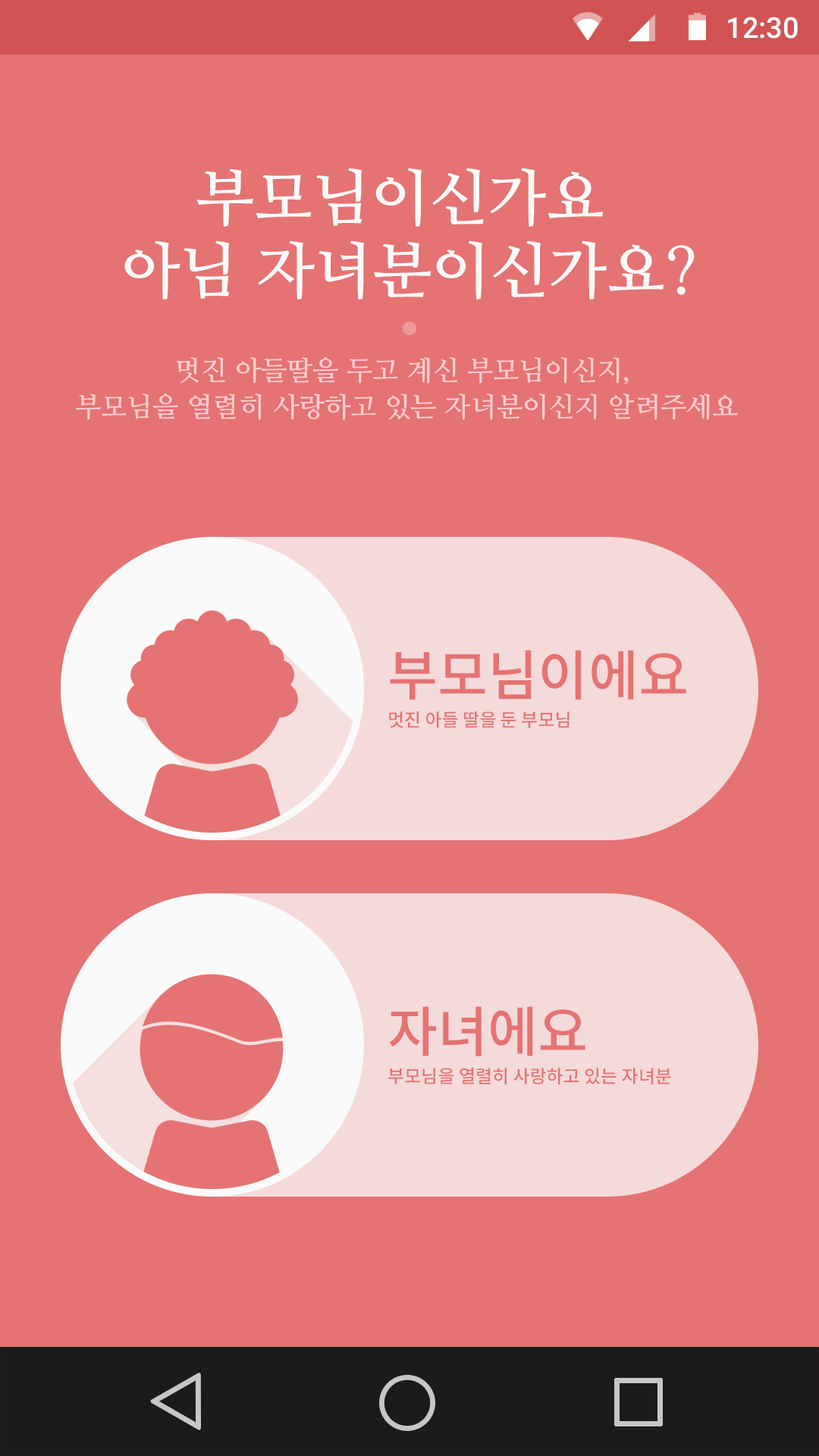
<style>
.page{position:relative;width:819px;height:1456px;background:#e57373}
.page>*{position:absolute;margin:0}
.t1{font:28.8px "Roboto-Medium";color:#ffffff}
.t2{font:61.4px/72.8px "NanumMyeongjoBold";color:#fafafa}
.t3{font:27.3px/36.4px "NanumMyeongjoBold";color:#ffcdd2}
.t4{font:54.6px "NotoSansCJKkr-Medium";color:#e57373}
.t5{font:18.2px "NotoSansCJKkr-Medium";color:#e57373}
</style>
<div class="page">
<p class="t1" style="left:728px;top:17px;width:70px;height:22px">12:30</p>
<p class="t2" style="left:124px;top:168px;width:571px;height:132px;text-align:center">부모님이신가요 <br>아님 자녀분이신가요?</p>
<p class="t3" style="left:75px;top:357px;width:663px;height:63px;text-align:center">멋진 아들딸을 두고 계신 부모님이신지, <br>부모님을 열렬히 사랑하고 있는 자녀분이신지 알려주세요</p>
<p class="t4" style="left:390px;top:650px;width:296px;height:50px">부모님이에요</p>
<p class="t5" style="left:389px;top:711px;width:181px;height:17px">멋진 아들 딸을 둔 부모님</p>
<p class="t4" style="left:389px;top:1006px;width:196px;height:50px">자녀에요</p>
<p class="t5" style="left:388px;top:1068px;width:283px;height:16px">부모님을 열렬히 사랑하고 있는 자녀분</p>
</div>
